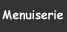
<style>
.page{position:relative;width:67px;height:32px;background:#333333}
.page>*{position:absolute;margin:0}
.t1{font:12px "ComicSansMS-Bold";color:#fdfafa}
</style>
<div class="page">
<p class="t1" style="left:2px;top:10px;width:61px;height:10px">Menuiserie</p>
</div>
